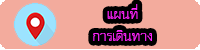
<style>
.page{position:relative;width:200px;height:50px;background:#f3ab9d}
.page>*{position:absolute;margin:0}
.t1{font:18.8px "THChakraPetch";color:#ff26fc}
</style>
<div class="page">
<p class="t1" style="left:93px;top:4px;width:59px;height:37px;text-align:center">แผนที่<br>การเดินทาง</p>
</div>
